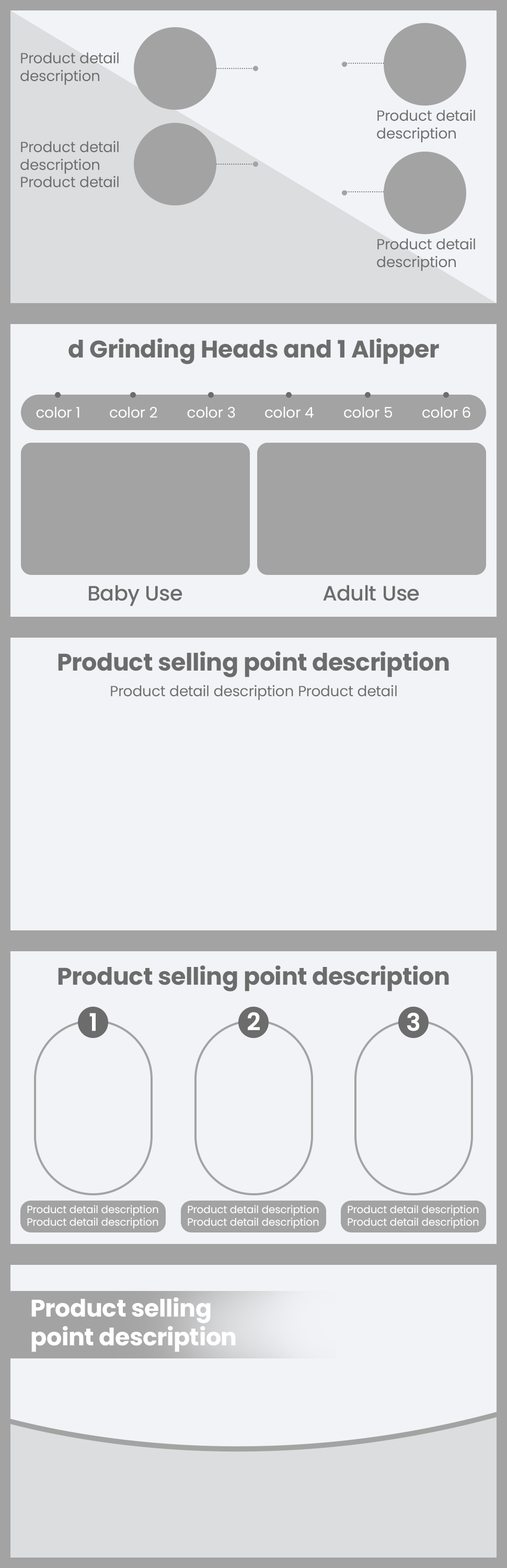
<style>
.page{position:relative;width:507px;height:1568px;background:#f2f3f6}
.page>*{position:absolute;margin:0}
.t1{font:14.6px "Poppins-Regular";color:#6c6c6c}
.t2{font:24px "Poppins-Bold";color:#6c6c6c}
.t3{font:14.6px "Poppins-Regular";color:#ffffff}
.t4{font:20.9px "Poppins-Medium";color:#6c6c6c}
.t5{font:24px "Poppins-SemiBold";color:#ffffff;text-transform:uppercase}
.t6{font:10.5px "Poppins-Regular";color:#ffffff}
.t7{font:24px "Poppins-Bold";color:#ffffff}
</style>
<div class="page">
<p class="t1" style="left:20px;top:52px;width:99px;height:33px">Product detail<br>description</p>
<p class="t1" style="left:377px;top:109px;width:98px;height:34px">Product detail<br>description</p>
<p class="t1" style="left:20px;top:141px;width:99px;height:47px">Product detail<br>description<br>Product detail</p>
<p class="t1" style="left:377px;top:238px;width:98px;height:33px">Product detail<br>description</p>
<p class="t2" style="left:68px;top:338px;width:371px;height:26px">d Grinding Heads and 1 Alipper</p>
<p class="t3" style="left:36px;top:407px;width:43px;height:11px">color 1</p>
<p class="t3" style="left:110px;top:407px;width:47px;height:11px">color 2</p>
<p class="t3" style="left:187px;top:407px;width:48px;height:11px">color 3</p>
<p class="t3" style="left:265px;top:407px;width:49px;height:11px">color 4</p>
<p class="t3" style="left:344px;top:407px;width:48px;height:11px">color 5</p>
<p class="t3" style="left:422px;top:407px;width:48px;height:11px">color 6</p>
<p class="t4" style="left:89px;top:585px;width:93px;height:21px">Baby Use</p>
<p class="t4" style="left:323px;top:585px;width:96px;height:16px">Adult Use</p>
<p class="t2" style="left:58px;top:651px;width:391px;height:26px">Product selling point description</p>
<p class="t1" style="left:111px;top:685px;width:286px;height:15px">Product detail description Product detail</p>
<p class="t2" style="left:58px;top:965px;width:391px;height:26px">Product selling point description</p>
<p class="t5" style="left:89px;top:1013px;width:7px;height:18px">1</p>
<p class="t5" style="left:248px;top:1012px;width:12px;height:18px">2</p>
<p class="t5" style="left:407px;top:1012px;width:13px;height:19px">3</p>
<p class="t6" style="left:27px;top:1205px;width:131px;height:24px">Product detail description<br>Product detail description</p>
<p class="t6" style="left:188px;top:1205px;width:131px;height:24px">Product detail description<br>Product detail description</p>
<p class="t6" style="left:348px;top:1205px;width:131px;height:24px">Product detail description<br>Product detail description</p>
<p class="t7" style="left:31px;top:1297px;width:205px;height:55px">Product selling<br>point description</p>
</div>
